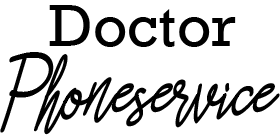
<style>
.page{position:relative;width:280px;height:140px;background:#ffffff}
.page>*{position:absolute;margin:0}
.t1{font:60px "Rockwell";color:#000000}
.t2{font:65px "Asfrogas";color:#000000}
</style>
<div class="page">
<p class="t1" style="left:49px;top:5px;width:187px;height:42px">Doctor</p>
<p class="t2" style="left:0px;top:52px;width:280px;height:83px">Phoneservice</p>
</div>
